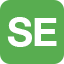
<style>
.page{position:relative;width:64px;height:64px;background:#58ad50}
.page>*{position:absolute;margin:0}
.t1{font:39.5px "HelveticaNeue-Bold";color:#ffffff}
</style>
<div class="page">
<p class="t1" style="left:7px;top:17px;width:50px;height:30px">SE</p>
</div>
